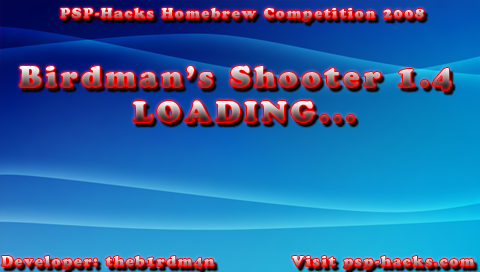
<style>
.page{position:relative;width:480px;height:272px}
.page>*{position:absolute;margin:0}
.t1{font:14px "CooperBlackStd";letter-spacing:0.125em}
.t2{font:30px "CooperBlackStd";letter-spacing:0.125em}
</style>
<div class="page">
<p class="t1" style="left:60px;top:8px;width:364px;height:13px">PSP-Hacks Homebrew Competition 2008</p>
<p class="t2" style="left:19px;top:65px;width:432px;height:25px">Birdman’s Shooter 1.4</p>
<p class="t2" style="left:133px;top:100px;width:222px;height:23px">LOADING...</p>
<p class="t1" style="left:1px;top:256px;width:213px;height:13px">Developer: theb1rdm4n</p>
<p class="t1" style="left:292px;top:256px;width:182px;height:13px">Visit psp-hacks.com</p>
</div>
